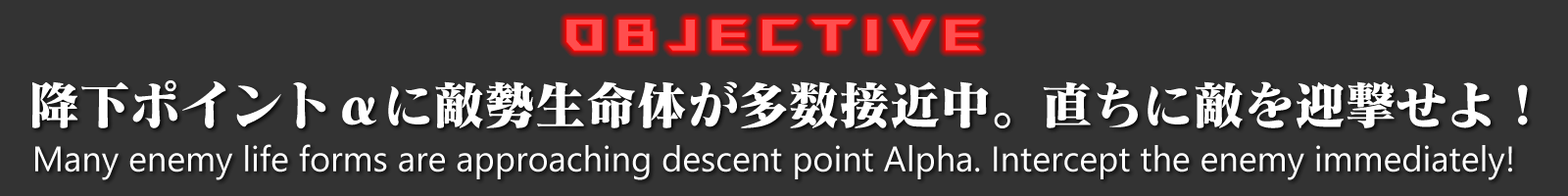
<style>
.page{position:relative;width:1568px;height:196px;background:#333333}
.page>*{position:absolute;margin:0}
.t1{font:44.1px "ROGFonts-Regular";letter-spacing:0.3em;color:#ff4e4e}
.t2{font:51.9px "EVA_Matisse_Standard-EB";letter-spacing:-0.025em;color:#ffffff}
.t3{font:35.3px "SegoeUI";color:#ffffff}
</style>
<div class="page">
<p class="t1" style="left:566px;top:20px;width:415px;height:31px">Objective</p>
<p class="t2" style="left:32px;top:80px;width:1496px;height:49px">降下ポイントαに敵勢生命体が多数接近中。直ちに敵を迎撃せよ！</p>
<p class="t3" style="left:35px;top:144px;width:1477px;height:36px">Many enemy life forms are approaching descent point Alpha. Intercept the enemy immediately!</p>
</div>
